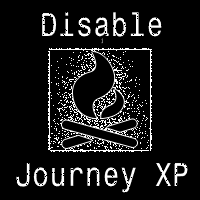
<style>
.page{position:relative;width:200px;height:200px;background:#000000}
.page>*{position:absolute;margin:0}
.t1{font:30px "MonospaceTypewriter";color:#ffffff}
.t2{font:5px "MonospaceTypewriter";color:#ffffff}
</style>
<div class="page">
<p class="t1" style="left:16px;top:12px;width:172px;height:181px;text-align:center">Disable<br><span class="t2">j<br><br><br><br><br><br><br><br><br><br><br><br><br><br><br><br><br><br><br></span>Journey XP</p>
</div>
